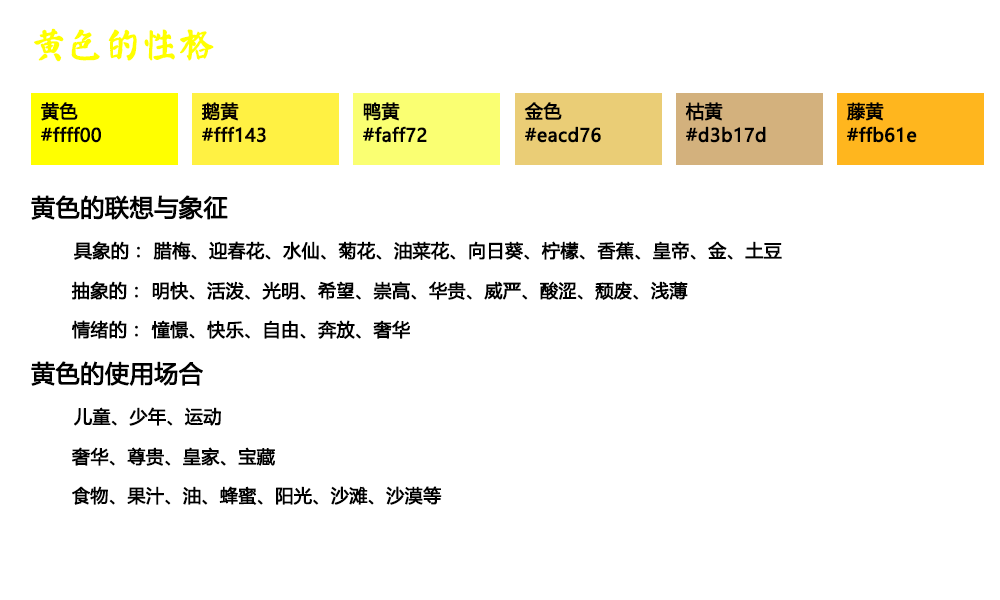
<style>
.page{position:relative;width:1000px;height:600px;background:#ffffff}
.page>*{position:absolute;margin:0}
.t1{font:36px "øów·»îów©I";color:#ffff00;font-weight:bold}
.t2{font:18px/24px "MicrosoftYaHei";color:#030000;font-weight:bold}
.t3{font:18px/24px "MicrosoftYaHei";color:#060000;font-weight:bold}
.t4{font:18px/24px "MicrosoftYaHei";color:#010000;font-weight:bold}
.t5{font:18px/24px "MicrosoftYaHei";color:#000000;font-weight:bold}
.t6{font:24px "MicrosoftYaHei";color:#000000;font-weight:bold}
.t7{font:18px "MicrosoftYaHei";color:#000000;font-weight:bold}
</style>
<div class="page">
<p class="t1" style="left:34px;top:28px;width:180px;height:34px">黄色的性格</p>
<p class="t2" style="left:41px;top:102px;width:60px;height:41px">黄色<br>#ffff00</p>
<p class="t3" style="left:202px;top:102px;width:64px;height:41px">鹅黄<br>#fff143</p>
<p class="t4" style="left:363px;top:102px;width:64px;height:41px">鸭黄<br>#faff72</p>
<p class="t5" style="left:524px;top:102px;width:77px;height:41px">金色<br>#eacd76</p>
<p class="t4" style="left:685px;top:102px;width:81px;height:41px">枯黄<br>#d3b17d</p>
<p class="t4" style="left:846px;top:102px;width:71px;height:41px">藤黄<br>#ffb61e</p>
<p class="t6" style="left:31px;top:195px;width:197px;height:25px">黄色的联想与象征</p>
<p class="t7" style="left:74px;top:241px;width:708px;height:19px">具象的： 腊梅、迎春花、水仙、菊花、油菜花、向日葵、柠檬、香蕉、皇帝、金、土豆</p>
<p class="t7" style="left:71px;top:281px;width:617px;height:19px">抽象的： 明快、活泼、光明、希望、崇高、华贵、威严、酸涩、颓废、浅薄</p>
<p class="t7" style="left:72px;top:320px;width:338px;height:19px">情绪的： 憧憬、快乐、自由、奔放、奢华</p>
<p class="t6" style="left:31px;top:361px;width:172px;height:25px">黄色的使用场合</p>
<p class="t7" style="left:74px;top:407px;width:147px;height:19px">儿童、少年、运动</p>
<p class="t7" style="left:72px;top:447px;width:203px;height:19px">奢华、尊贵、皇家、宝藏</p>
<p class="t7" style="left:72px;top:486px;width:370px;height:19px">食物、果汁、油、蜂蜜、阳光、沙滩、沙漠等</p>
</div>
